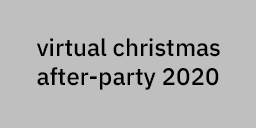
<style>
.page{position:relative;width:256px;height:128px;background:#bfbfbf}
.page>*{position:absolute;margin:0}
.t1{font:24px "IBMPlexSans-Medium";color:#000000}
</style>
<div class="page">
<p class="t1" style="left:36px;top:38px;width:184px;height:52px">virtual christmas <br>after-party 2020</p>
</div>
